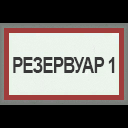
<style>
.page{position:relative;width:128px;height:128px;background:#000000}
.page>*{position:absolute;margin:0}
.t1{font:21.7px "Arial-BoldMT";letter-spacing:-0.06em;color:#383838;scale:0.79 1}
</style>
<div class="page">
<p class="t1" style="left:13px;top:57px;width:102px;height:16px">РЕЗЕРВУАР 1</p>
</div>
